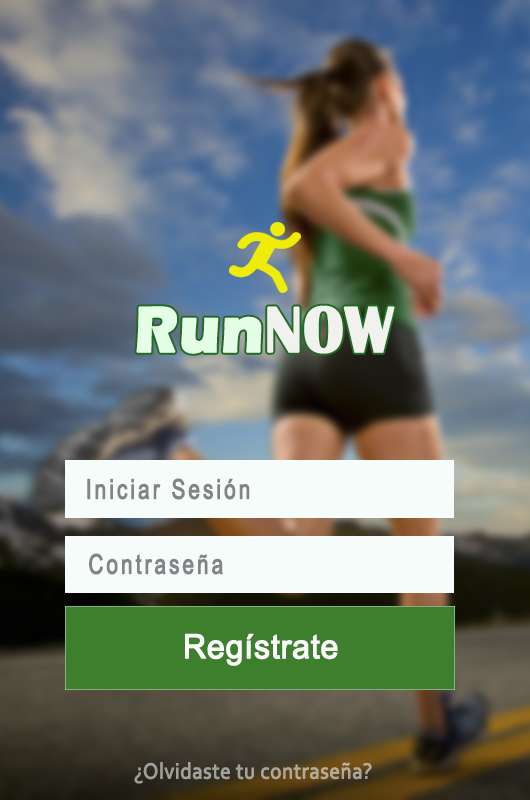
<style>
.page{position:relative;width:530px;height:800px}
.page>*{position:absolute;margin:0}
.t1{font:66.7px "ErasITC-Bold";color:#e5fee6;font-weight:bold;scale:0.92 1}
.t2{font:66.7px "BritannicBold";color:#f1f2ed;font-weight:bold;scale:0.92 1}
.t3{font:27.1px "ArialNarrow";letter-spacing:0.1em;color:#848387;font-weight:bold;scale:0.92 1}
.t4{font:33.3px "ArialMT";color:#fbfbfb;font-weight:bold;scale:0.96 1}
.t5{font:22.9px "Corbel";color:#a4a299;font-weight:bold;scale:0.92 1}
</style>
<div class="page">
<p class="t1" style="left:136px;top:305px;width:259px;height:49px">Run<span class="t2">NOW</span></p>
<p class="t3" style="left:87px;top:478px;width:163px;height:22px">Iniciar Sesión</p>
<p class="t3" style="left:89px;top:553px;width:134px;height:22px">Contraseña</p>
<p class="t4" style="left:185px;top:633px;width:153px;height:33px">Regístrate</p>
<p class="t5" style="left:134px;top:762px;width:238px;height:22px">¿Olvidaste tu contraseña?</p>
</div>
